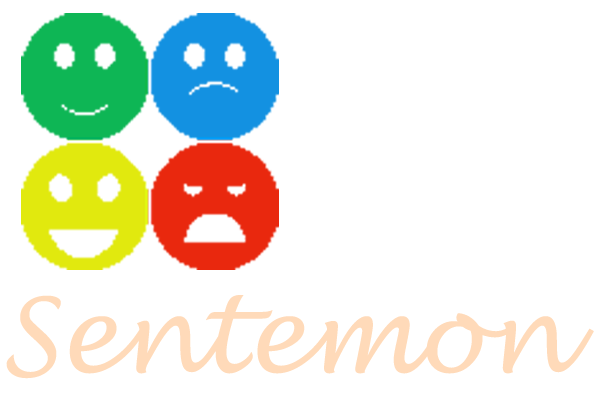
<style>
.page{position:relative;width:600px;height:400px;background:#ffffff}
.page>*{position:absolute;margin:0}
.t1{font:103px "LucidaHandwriting-Italic";color:#ffdab9}
</style>
<div class="page">
<p class="t1" style="left:6px;top:295px;width:588px;height:84px">Sentemon</p>
</div>
